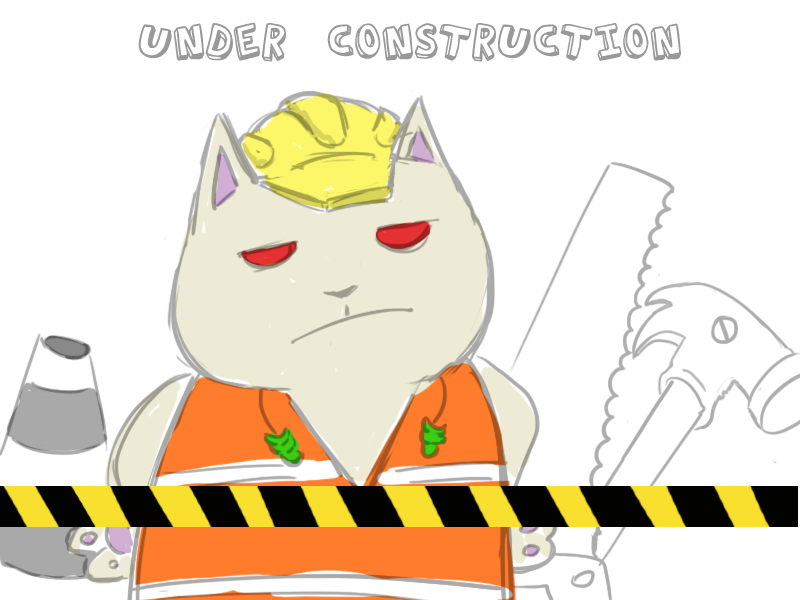
<style>
.page{position:relative;width:800px;height:600px;background:#ffffff}
.page>*{position:absolute;margin:0}
.t1{font:48px "ActionJackson";color:#999999}
</style>
<div class="page">
<p class="t1" style="left:138px;top:22px;width:543px;height:40px">UNDER CONSTRUCTION</p>
</div>
